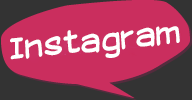
<style>
.page{position:relative;width:192px;height:100px;background:#ca2e5e}
.page>*{position:absolute;margin:0}
.t1{font:34px "SuplexmentaryComicNC";color:#ffffff}
</style>
<div class="page">
<p class="t1" style="left:10px;top:26px;width:170px;height:34px;rotate:-6deg">Instagram</p>
</div>
